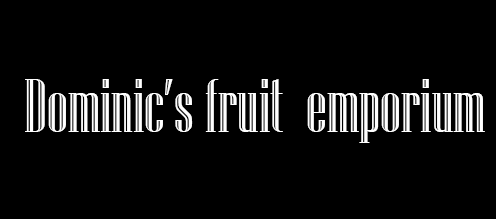
<style>
.page{position:relative;width:496px;height:219px;background:#000000}
.page>*{position:absolute;margin:0}
.t1{font:75px "NiagaraEngraved-Reg";color:#ffffff}
.t2{font:58.3px "Arial-BoldMT";color:#ffffff}
</style>
<div class="page">
<p class="t1" style="left:25px;top:79px;width:460px;height:64px"><span class="t2"><br></span>Dominic’s fruit  emporium</p>
</div>
